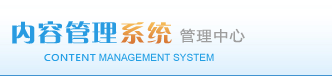
<style>
.page{position:relative;width:332px;height:76px}
.page>*{position:absolute;margin:0}
.t1{font:24px "FZCQFW--GB1-0";letter-spacing:0.05em;color:#289be1;scale:1.09 1}
.t2{font:14px "MicrosoftYaHei";letter-spacing:0.09em;color:#9d9d9d;scale:1.09 1}
.t3{font:9px "MicrosoftYaHei";letter-spacing:0.09em;color:#249fe5;scale:1.09 1}
</style>
<div class="page">
<p class="t1" style="left:12px;top:21px;width:105px;height:23px">内容管理</p>
<p class="t2" style="left:180px;top:28px;width:65px;height:15px">管理中心</p>
<p class="t3" style="left:44px;top:54px;width:52px;height:7px">CONTENT</p>
</div>
